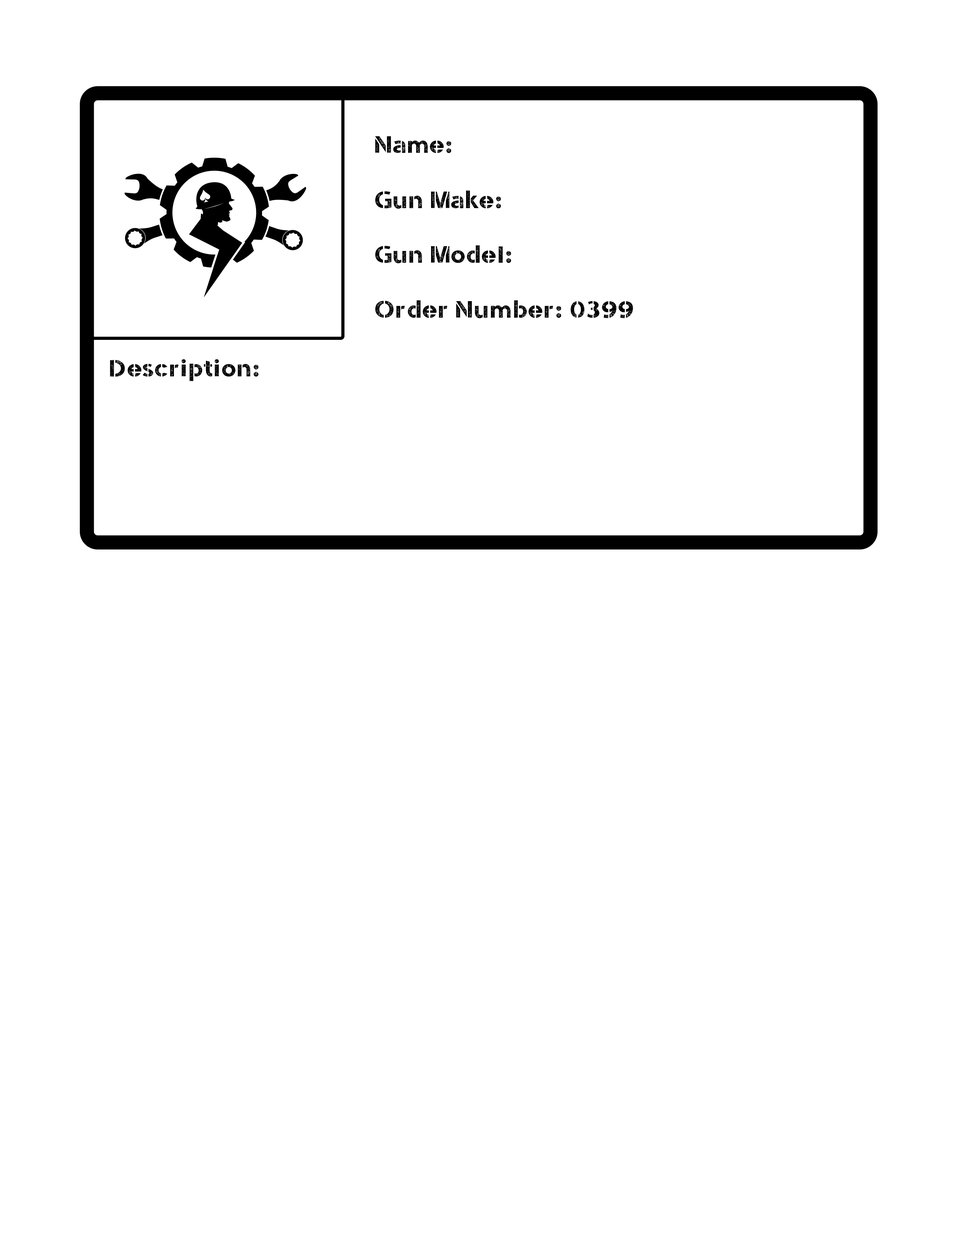
<style>
.page{position:relative;width:960px;height:1242px;background:#ffffff}
.page>*{position:absolute;margin:0}
.t1{font:23.5px "StencilArmyWWI";letter-spacing:0.02em;color:#000000}
</style>
<div class="page">
<p class="t1" style="left:375px;top:136px;width:76px;height:17px">Name:</p>
<p class="t1" style="left:375px;top:190px;width:126px;height:19px">Gun Make:</p>
<p class="t1" style="left:375px;top:245px;width:136px;height:19px">Gun Model:</p>
<p class="t1" style="left:375px;top:300px;width:258px;height:18px">Order Number: 0399</p>
<p class="t1" style="left:110px;top:359px;width:149px;height:22px">Description:</p>
</div>
